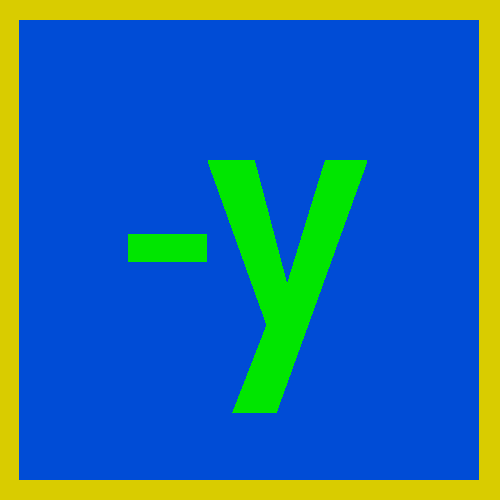
<style>
.page{position:relative;width:500px;height:500px;background:#004cd6}
.page>*{position:absolute;margin:0}
.t1{font:353px "Futura-CondensedMedium";color:#00e600;scale:1.25 1}
</style>
<div class="page">
<p class="t1" style="left:128px;top:160px;width:239px;height:253px">-y</p>
</div>
